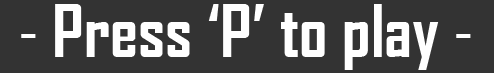
<style>
.page{position:relative;width:494px;height:73px;background:#333333}
.page>*{position:absolute;margin:0}
.t1{font:70px "AgencyFB-Bold";color:#ffffff}
.t2{font:70px "AgencyFB-Reg";color:#ffffff}
</style>
<div class="page">
<p class="t1" style="left:21px;top:4px;width:450px;height:66px"><span class="t2">- </span>Press ‘P’ to play<span class="t2"> -</span></p>
</div>
